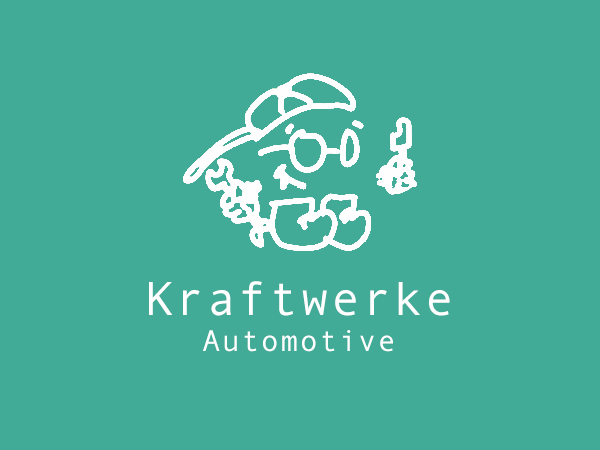
<style>
.page{position:relative;width:600px;height:450px;background:#42ab98}
.page>*{position:absolute;margin:0}
.t1{font:48px/48px "AndaleMono";letter-spacing:0.05em;color:#ffffff}
.t2{font:30px/36px "AndaleMono";letter-spacing:0.05em;color:#ffffff}
</style>
<div class="page">
<p class="t1" style="left:149px;top:281px;width:301px;height:71px;text-align:center">Kraftwerke<br><span class="t2">Automotive</span></p>
</div>
